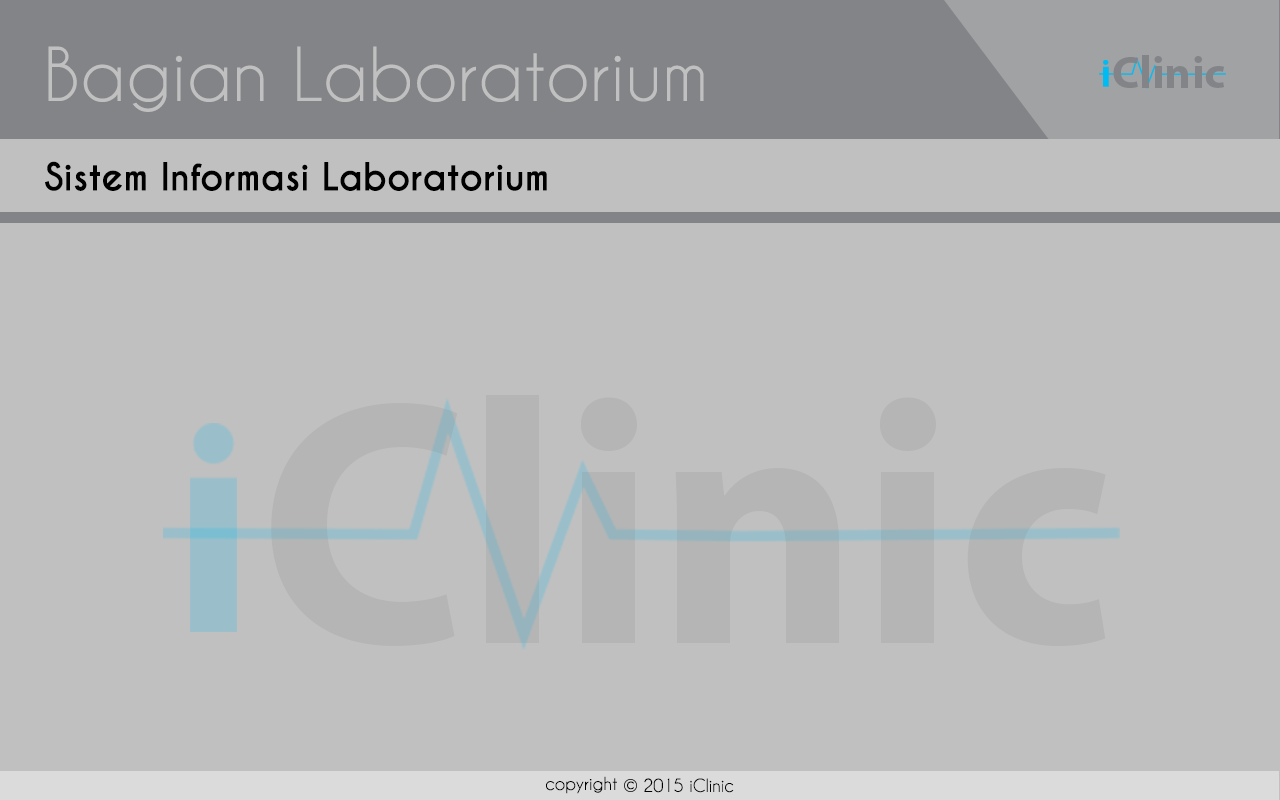
<style>
.page{position:relative;width:1280px;height:800px;background:#c0c0c0}
.page>*{position:absolute;margin:0}
.t1{font:69.4px "CaviarDreams";color:#c0c0c0}
.t2{font:45.1px "MyriadPro-Bold";color:#828487}
.t3{font:36.1px "CaviarDreams-Bold";color:#000000}
.t4{font:350px "MyriadPro-Bold";color:#b5b5b5}
.t5{font:16.8px "CaviarDreams";color:#000000}
.t6{font:14.3px "CaviarDreams";color:#000000}
.t7{font:16.9px "CaviarDreams";color:#000000}
</style>
<div class="page">
<p class="t1" style="left:48px;top:46px;width:656px;height:66px">Bagian Laboratorium</p>
<p class="t2" style="left:1113px;top:55px;width:111px;height:33px">Clinic</p>
<p class="t3" style="left:45px;top:161px;width:502px;height:30px">Sistem Informasi Laboratorium</p>
<p class="t4" style="left:271px;top:395px;width:835px;height:252px">Clinic</p>
<p class="t5" style="left:546px;top:776px;width:71px;height:18px">copyright</p>
<p class="t6" style="left:627px;top:781px;width:7px;height:9px">c</p>
<p class="t7" style="left:644px;top:778px;width:90px;height:15px">2015 iClinic</p>
</div>
